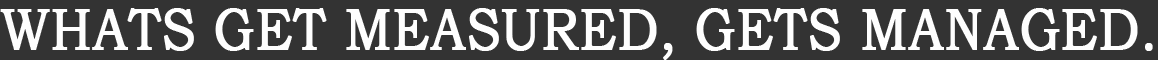
<style>
.page{position:relative;width:1158px;height:60px;background:#333333}
.page>*{position:absolute;margin:0}
.t1{font:57.8px "BookmanOldStyle";color:#fefefe;text-transform:uppercase;font-weight:bold;scale:0.88 1}
</style>
<div class="page">
<p class="t1" style="left:0px;top:8px;width:1153px;height:52px">Whats get measured, gets managed.</p>
</div>
